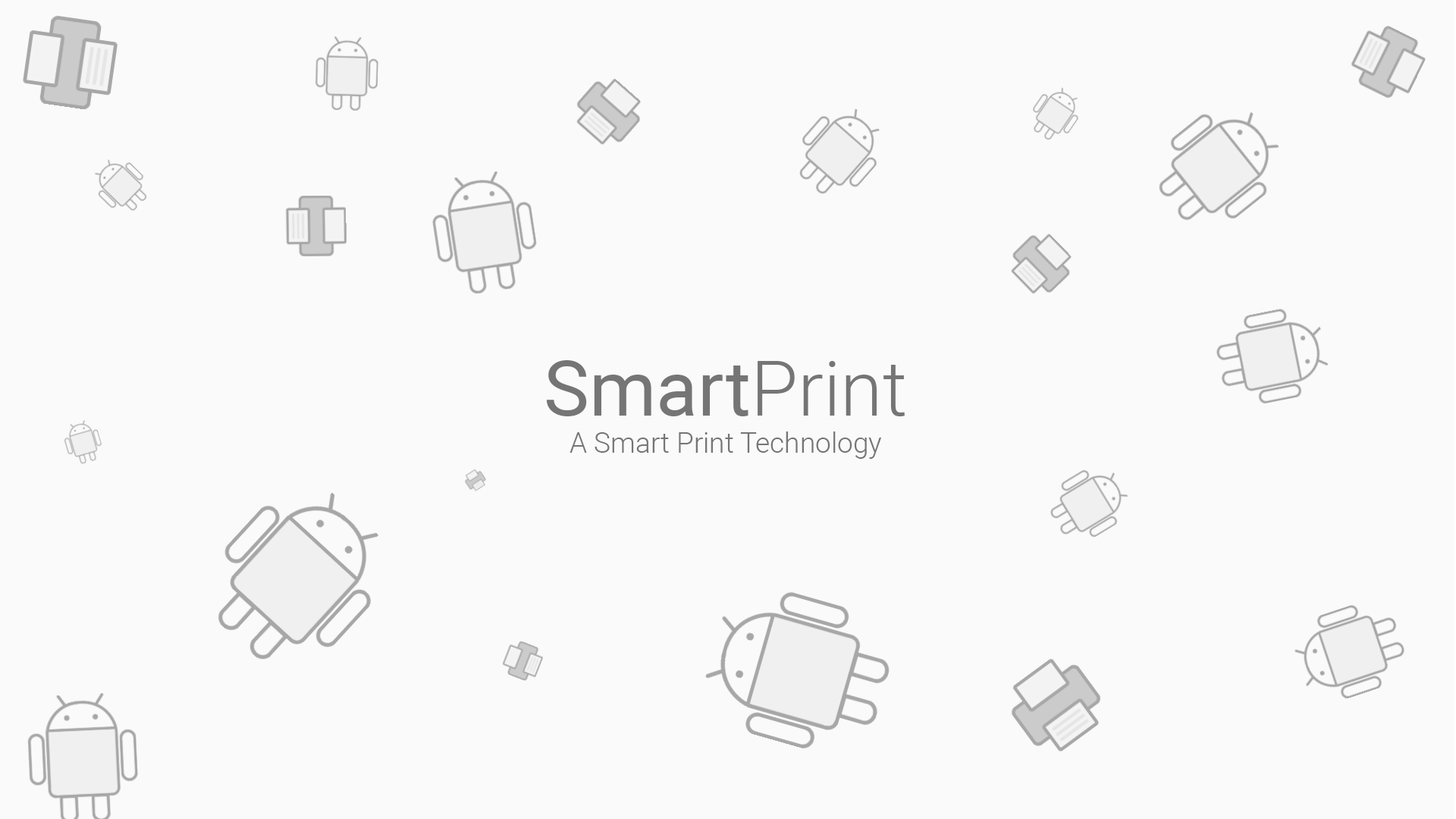
<style>
.page{position:relative;width:1456px;height:819px;background:#fafafa}
.page>*{position:absolute;margin:0}
.t1{font:76.6px "Roboto-Regular";color:#757575}
.t2{font:76.6px "Roboto-Light";color:#757575}
.t3{font:28.1px "Roboto-Light";color:#757575}
</style>
<div class="page">
<p class="t1" style="left:546px;top:360px;width:359px;height:56px">Smart<span class="t2">Print</span></p>
<p class="t3" style="left:570px;top:431px;width:312px;height:28px">A Smart Print Technology</p>
</div>
